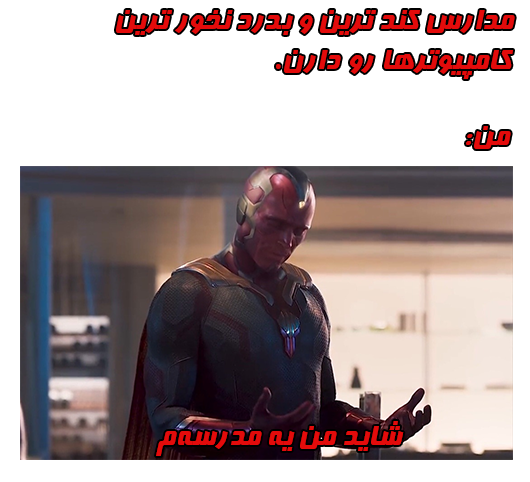
<style>
.page{position:relative;width:530px;height:482px;background:#ffffff}
.page>*{position:absolute;margin:0}
.t1{font:33.3px "Far.Farnaz";color:#e30b0b}
</style>
<div class="page">
<p class="t1" style="left:116px;top:10px;width:399px;height:69px;text-align:center">مدارس کند ترین و بدرد نخور ترین<br> کامپیوترها رو دارن.</p>
<p class="t1" style="left:466px;top:126px;width:45px;height:23px">من:</p>
<p class="t1" style="left:156px;top:421px;width:248px;height:35px">شاید من یه مدرسه‌م</p>
</div>
